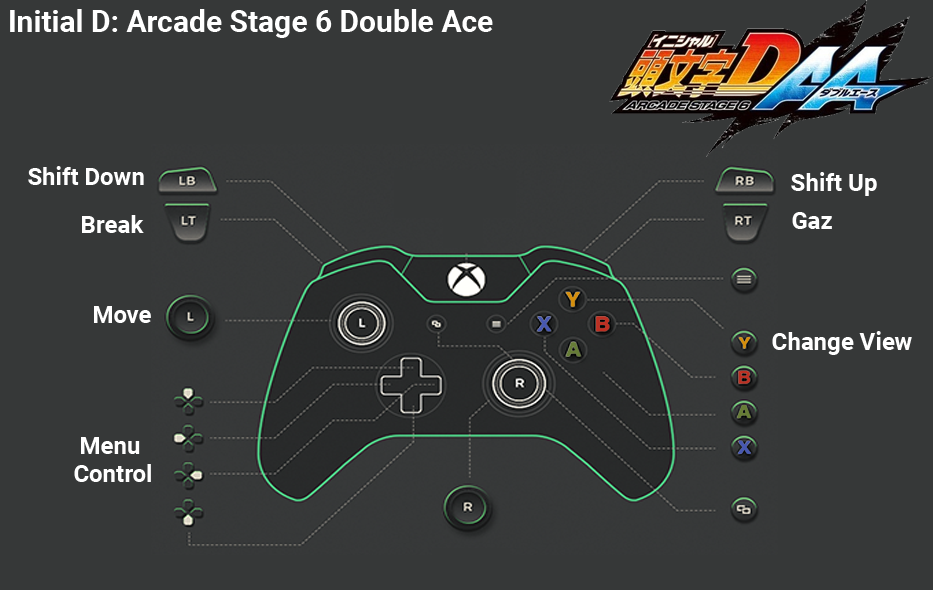
<style>
.page{position:relative;width:933px;height:590px;background:#363838}
.page>*{position:absolute;margin:0}
.t1{font:30px "Roboto-Bold";color:#ffffff}
.t2{font:24px "Roboto-Bold";color:#ffffff}
.t3{font:24px/28px "Roboto-Bold";color:#ffffff}
</style>
<div class="page">
<p class="t1" style="left:10px;top:9px;width:483px;height:29px">Initial D: Arcade Stage 6 Double Ace</p>
<p class="t2" style="left:28px;top:166px;width:116px;height:19px">Shift Down</p>
<p class="t2" style="left:791px;top:172px;width:86px;height:24px">Shift Up</p>
<p class="t2" style="left:82px;top:215px;width:62px;height:18px">Break</p>
<p class="t2" style="left:792px;top:212px;width:40px;height:17px">Gaz</p>
<p class="t2" style="left:94px;top:306px;width:57px;height:17px">Move</p>
<p class="t2" style="left:772px;top:331px;width:140px;height:24px">Change View</p>
<p class="t3" style="left:74px;top:437px;width:77px;height:45px;text-align:center">Menu <br>Control</p>
</div>
